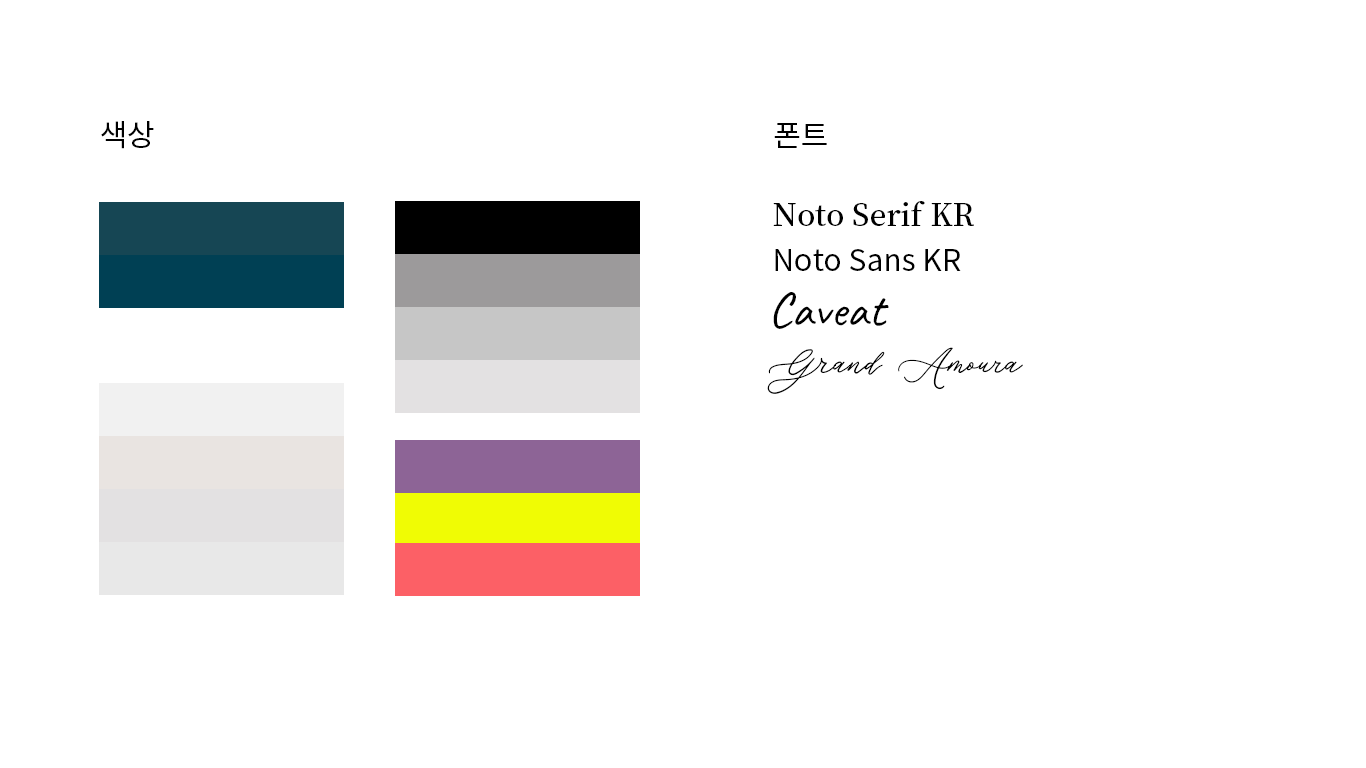
<style>
.page{position:relative;width:1366px;height:768px;background:#ffffff}
.page>*{position:absolute;margin:0}
.t1{font:30px "NotoSansCJKkr-Regular";color:#000000}
.t2{font:30px "NotoSerifCJKkr-SemiBold";color:#000000}
.t3{font:50px "Caveat-Regular";color:#000000}
.t4{font:50px "GrandAmoura";color:#000000}
</style>
<div class="page">
<p class="t1" style="left:101px;top:121px;width:53px;height:28px">색상</p>
<p class="t1" style="left:774px;top:123px;width:53px;height:25px">폰트</p>
<p class="t2" style="left:773px;top:201px;width:201px;height:25px">Noto Serif KR</p>
<p class="t1" style="left:775px;top:249px;width:186px;height:22px">Noto Sans KR</p>
<p class="t3" style="left:773px;top:292px;width:116px;height:37px">Caveat</p>
<p class="t4" style="left:767px;top:347px;width:256px;height:47px">Grand Amoura</p>
</div>
